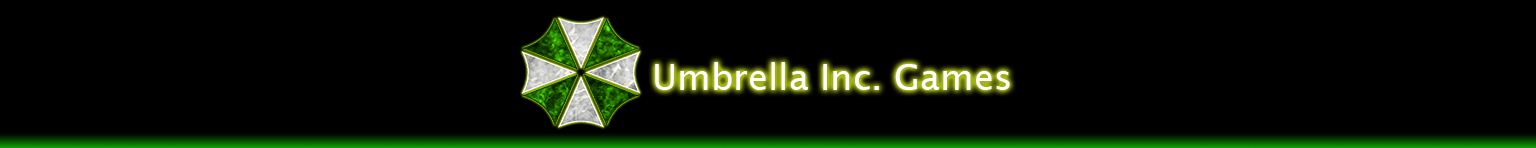
<style>
.page{position:relative;width:1536px;height:148px;background:#000000}
.page>*{position:absolute;margin:0}
.t1{font:36px "LucidaSans";color:#ffffff}
</style>
<div class="page">
<p class="t1" style="left:655px;top:62px;width:355px;height:28px">Umbrella Inc. Games</p>
</div>
